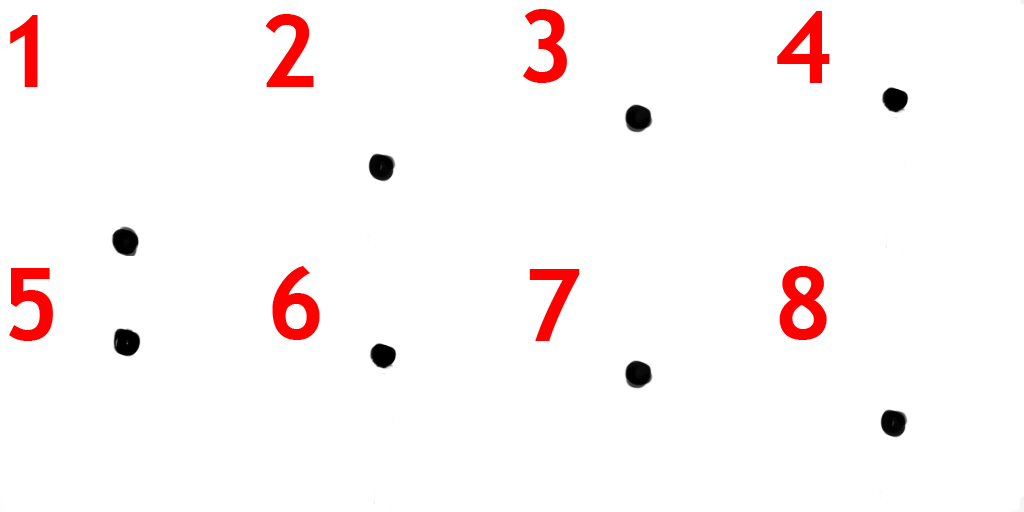
<style>
.page{position:relative;width:1024px;height:512px;background:#ffffff}
.page>*{position:absolute;margin:0}
.t1{font:100px "TrebuchetMS-Bold";color:#ff0000}
</style>
<div class="page">
<p class="t1" style="left:10px;top:15px;width:28px;height:72px">1</p>
<p class="t1" style="left:265px;top:14px;width:49px;height:73px">2</p>
<p class="t1" style="left:523px;top:9px;width:44px;height:74px">3</p>
<p class="t1" style="left:777px;top:11px;width:53px;height:72px">4</p>
<p class="t1" style="left:9px;top:268px;width:44px;height:73px">5</p>
<p class="t1" style="left:272px;top:266px;width:48px;height:74px">6</p>
<p class="t1" style="left:529px;top:269px;width:51px;height:72px">7</p>
<p class="t1" style="left:779px;top:266px;width:48px;height:74px">8</p>
</div>
